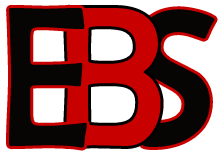
<style>
.page{position:relative;width:221px;height:155px;background:#ffffff}
.page>*{position:absolute;margin:0}
.t1{font:201.9px "BerlinSansFB-Reg";color:#070404;scale:0.83 1}
.t2{font:201.9px "BerlinSansFB-Reg";color:#c90000;scale:0.89 1}
.t3{font:196.2px "BerlinSansFB-Reg";color:#070404}
</style>
<div class="page">
<p class="t1" style="left:9px;top:7px;width:78px;height:141px">E</p>
<p class="t2" style="left:66px;top:7px;width:95px;height:139px">B</p>
<p class="t3" style="left:136px;top:9px;width:79px;height:138px">S</p>
</div>
